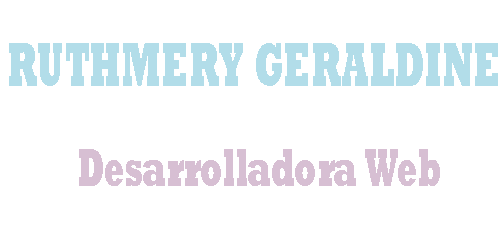
<style>
.page{position:relative;width:500px;height:250px;background:#ffffff}
.page>*{position:absolute;margin:0}
.t1{font:63px "Rockwell-ExtraBold";color:#b2dde9;scale:0.56 1}
.t2{font:54px "Rockwell-ExtraBold";color:#d7bfd3;scale:0.56 1}
</style>
<div class="page">
<p class="t1" style="left:9px;top:43px;width:489px;height:43px">RUTHMERY GERALDINE</p>
<p class="t2" style="left:79px;top:149px;width:361px;height:37px">Desarrolladora Web</p>
</div>
